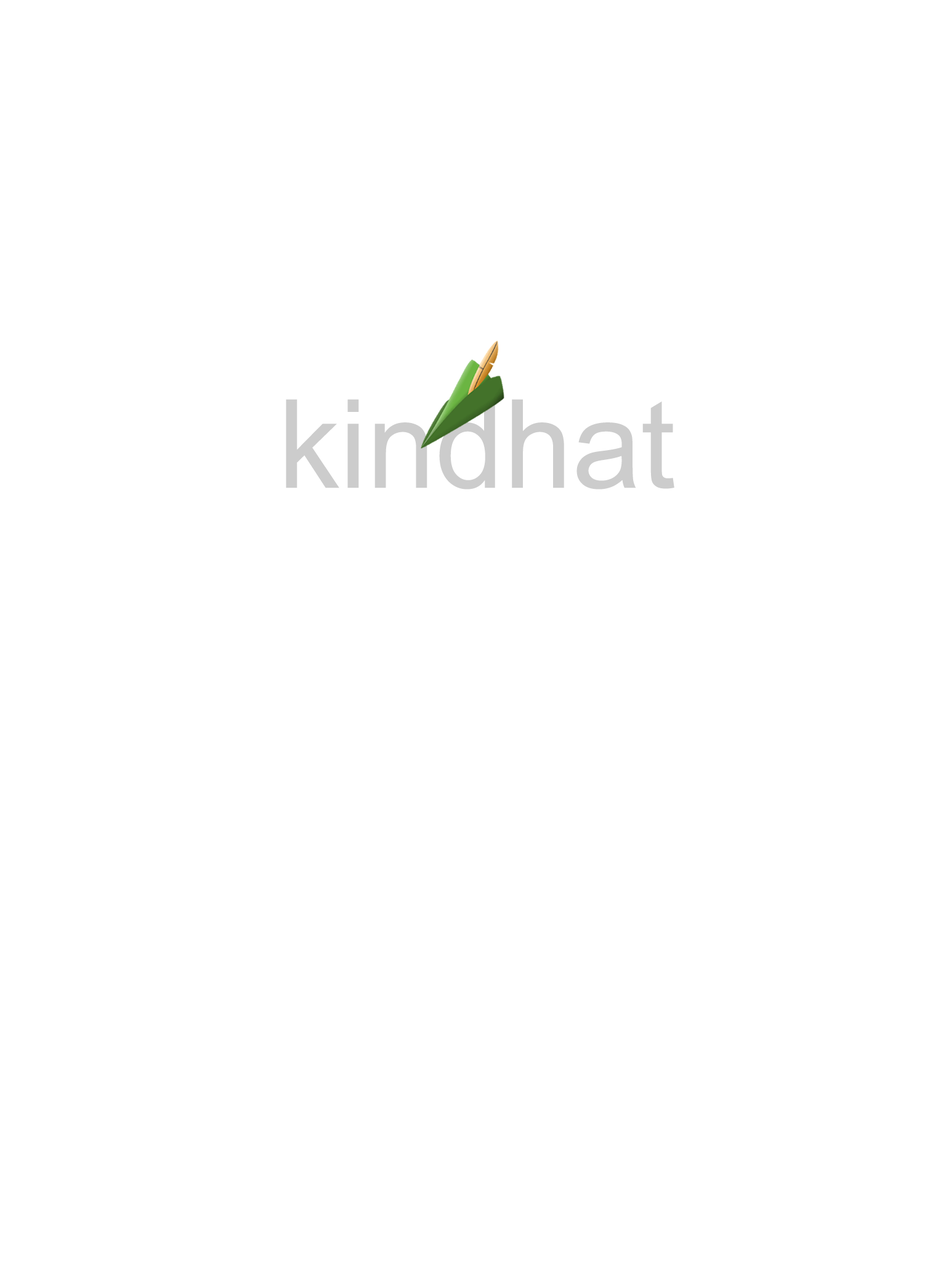
<style>
.page{position:relative;width:946px;height:1261px;background:#ffffff}
.page>*{position:absolute;margin:0}
.t1{font:123.1px "ArialMT";color:#cccccc}
</style>
<div class="page">
<p class="t1" style="left:286px;top:399px;width:388px;height:90px">kindhat</p>
</div>
